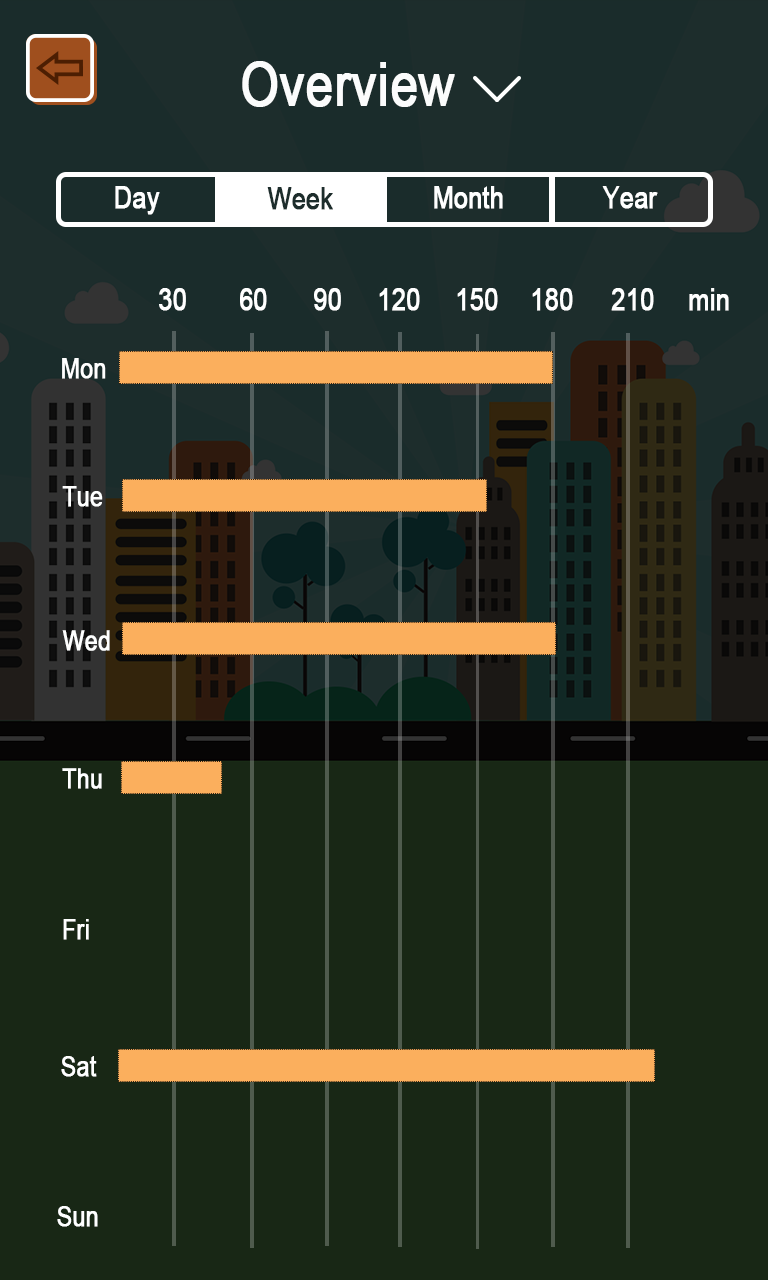
<style>
.page{position:relative;width:768px;height:1280px;background:#182715}
.page>*{position:absolute;margin:0}
.t1{font:60px "ArialMT";color:#fbfcfc;font-weight:bold;scale:0.82 1}
.t2{font:30px "ArialMT";color:#feffff;font-weight:bold;scale:0.82 1}
.t3{font:30px "ArialMT";color:#1d2d2c;font-weight:bold;scale:0.82 1}
.t4{font:27.7px "ArialMT";color:#feffff;font-weight:bold;scale:0.82 1}
</style>
<div class="page">
<p class="t1" style="left:242px;top:61px;width:213px;height:46px">Overview</p>
<p class="t2" style="left:115px;top:186px;width:45px;height:29px">Day</p>
<p class="t3" style="left:267px;top:187px;width:66px;height:23px">Week</p>
<p class="t2" style="left:434px;top:186px;width:69px;height:23px">Month</p>
<p class="t2" style="left:602px;top:186px;width:56px;height:23px">Year</p>
<p class="t2" style="left:159px;top:288px;width:27px;height:23px">30</p>
<p class="t2" style="left:240px;top:288px;width:27px;height:23px">60</p>
<p class="t2" style="left:314px;top:288px;width:27px;height:23px">90</p>
<p class="t2" style="left:379px;top:288px;width:41px;height:23px">120</p>
<p class="t2" style="left:457px;top:288px;width:41px;height:23px">150</p>
<p class="t2" style="left:532px;top:288px;width:41px;height:23px">180</p>
<p class="t2" style="left:611px;top:288px;width:43px;height:23px">210</p>
<p class="t2" style="left:689px;top:288px;width:40px;height:23px">min</p>
<p class="t4" style="left:62px;top:358px;width:44px;height:21px">Mon</p>
<p class="t4" style="left:62px;top:486px;width:41px;height:21px">Tue</p>
<p class="t4" style="left:62px;top:630px;width:48px;height:21px">Wed</p>
<p class="t4" style="left:62px;top:768px;width:40px;height:21px">Thu</p>
<p class="t4" style="left:63px;top:919px;width:26px;height:21px">Fri</p>
<p class="t4" style="left:61px;top:1056px;width:36px;height:21px">Sat</p>
<p class="t4" style="left:57px;top:1206px;width:41px;height:21px">Sun</p>
</div>
